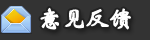
<style>
.page{position:relative;width:150px;height:40px;background:#333333}
.page>*{position:absolute;margin:0}
.t1{font:24px "STXinwei";letter-spacing:-0.05em;color:#ffffff;font-weight:bold}
</style>
<div class="page">
<p class="t1" style="left:40px;top:7px;width:91px;height:23px">意见反馈</p>
</div>
